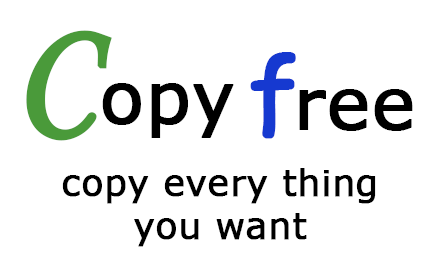
<style>
.page{position:relative;width:440px;height:280px;background:#ffffff}
.page>*{position:absolute;margin:0}
.t1{font:154.5px "STLiti";color:#4a9a3a;font-weight:bold}
.t2{font:100px "ComicSansMS";color:#1639d0;font-weight:bold}
.t3{font:72px "Verdana";color:#000000;font-weight:bold}
.t4{font:36px "Verdana";color:#000000;font-weight:bold}
</style>
<div class="page">
<p class="t1" style="left:26px;top:30px;width:86px;height:111px">C</p>
<p class="t2" style="left:250px;top:52px;width:46px;height:87px">f</p>
<p class="t3" style="left:102px;top:83px;width:132px;height:55px">opy</p>
<p class="t3" style="left:299px;top:89px;width:114px;height:42px">ree</p>
<p class="t4" style="left:62px;top:168px;width:314px;height:79px;text-align:center">copy every thing<br>you want</p>
</div>
